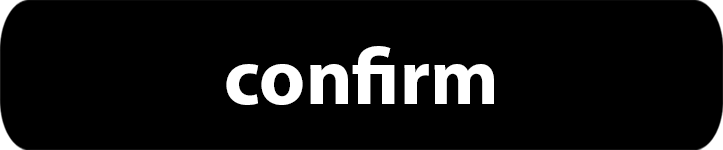
<style>
.page{position:relative;width:723px;height:150px;background:#000000}
.page>*{position:absolute;margin:0}
.t1{font:80px "MyriadPro-Bold";color:#ffffff}
</style>
<div class="page">
<p class="t1" style="left:226px;top:46px;width:268px;height:59px">confirm</p>
</div>
